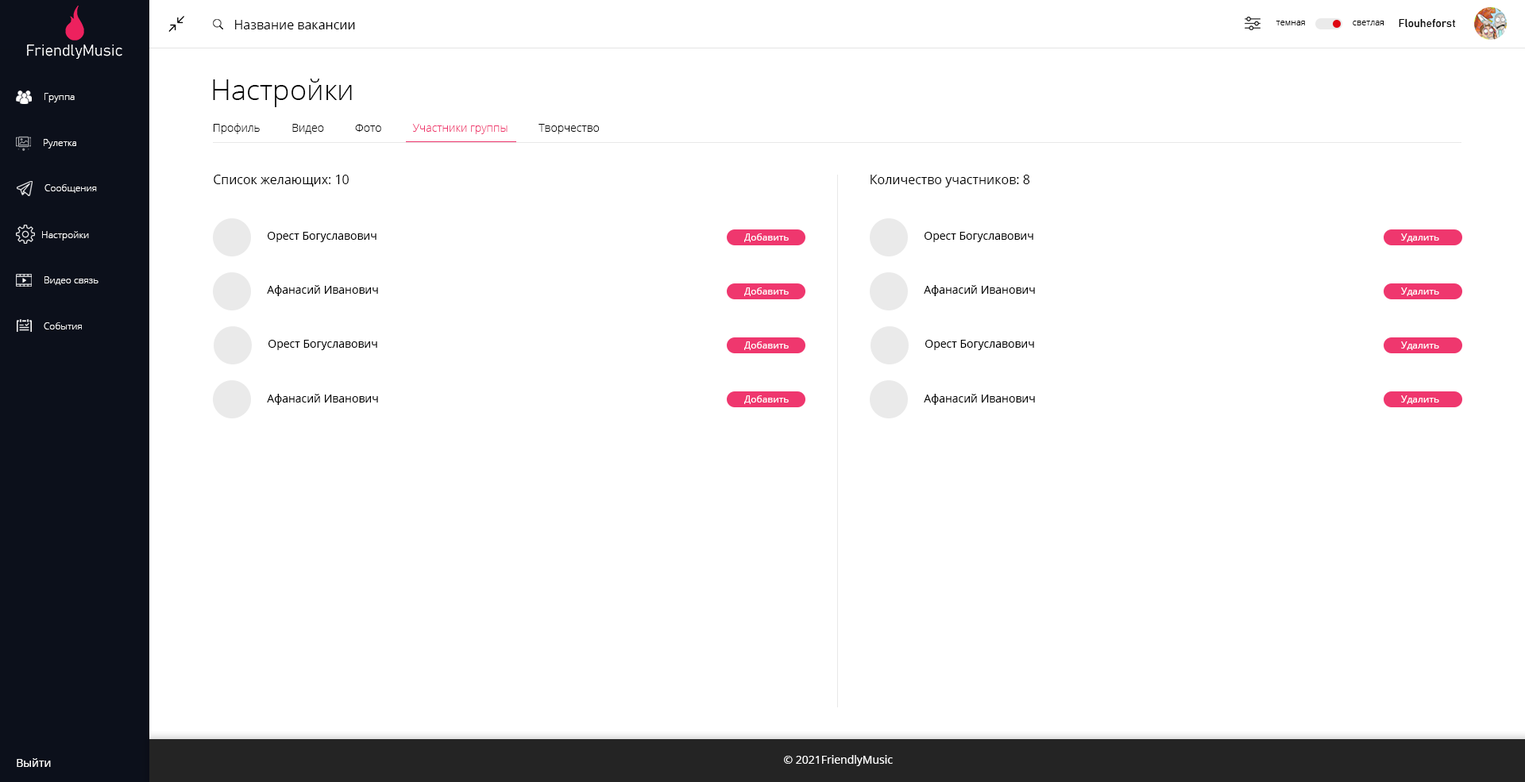
<style>
.page{position:relative;width:1525px;height:782px;background:#ffffff}
.page>*{position:absolute;margin:0}
.t1{font:12.7px "OpenSans";color:#000000}
.t2{font:8.7px "OpenSans-Light";color:#000000}
.t3{font:11.1px "Bahnschrift";color:#000000}
.t4{font:28.6px "OpenSans-Light";color:#000000}
.t5{font:9.5px "OpenSans-Light";color:#ffffff}
.t6{font:11.1px "OpenSans-Light";color:#000000}
.t7{font:11.1px "OpenSans-Light";color:#ef376e}
.t8{font:11.1px "OpenSans";color:#000000}
.t9{font:9.5px "OpenSans";color:#ffffff}
.t10{font:11.1px "OpenSans";color:#ffffff}
.t11{font:11.1px "aakar-medium";color:#ffffff}
</style>
<div class="page">
<p class="t1" style="left:235px;top:20px;width:120px;height:9px">Название вакансии</p>
<p class="t2" style="left:1275px;top:21px;width:30px;height:4px">темная</p>
<p class="t2" style="left:1352px;top:21px;width:31px;height:4px">светлая</p>
<p class="t3" style="left:1398px;top:18px;width:57px;height:10px">Flouheforst</p>
<p class="t4" style="left:213px;top:79px;width:139px;height:28px">Настройки</p>
<p class="t5" style="left:44px;top:93px;width:31px;height:9px">Группа</p>
<p class="t6" style="left:214px;top:123px;width:46px;height:11px">Профиль</p>
<p class="t6" style="left:292px;top:124px;width:32px;height:10px">Видео</p>
<p class="t6" style="left:355px;top:124px;width:26px;height:8px">Фото</p>
<p class="t7" style="left:412px;top:124px;width:95px;height:10px">Участники группы</p>
<p class="t6" style="left:538px;top:124px;width:61px;height:10px">Творчество</p>
<p class="t5" style="left:44px;top:139px;width:32px;height:9px">Рулетка</p>
<p class="t5" style="left:44px;top:184px;width:53px;height:9px">Сообщения</p>
<p class="t1" style="left:214px;top:175px;width:135px;height:12px">Список желающих: 10</p>
<p class="t1" style="left:870px;top:175px;width:160px;height:12px">Количество участников: 8</p>
<p class="t5" style="left:42px;top:231px;width:47px;height:10px">Настройки</p>
<p class="t8" style="left:268px;top:232px;width:108px;height:10px">Орест Богуславович</p>
<p class="t9" style="left:744px;top:233px;width:44px;height:9px">Добавить</p>
<p class="t8" style="left:924px;top:232px;width:109px;height:10px">Орест Богуславович</p>
<p class="t9" style="left:1401px;top:233px;width:38px;height:9px">Удалить</p>
<p class="t5" style="left:44px;top:276px;width:54px;height:9px">Видео связь</p>
<p class="t8" style="left:267px;top:285px;width:111px;height:11px">Афанасий Иванович</p>
<p class="t9" style="left:744px;top:287px;width:44px;height:9px">Добавить</p>
<p class="t8" style="left:923px;top:285px;width:112px;height:11px">Афанасий Иванович</p>
<p class="t9" style="left:1401px;top:287px;width:38px;height:9px">Удалить</p>
<p class="t5" style="left:44px;top:322px;width:38px;height:8px">События</p>
<p class="t8" style="left:268px;top:340px;width:109px;height:10px">Орест Богуславович</p>
<p class="t9" style="left:744px;top:341px;width:44px;height:9px">Добавить</p>
<p class="t8" style="left:925px;top:340px;width:109px;height:10px">Орест Богуславович</p>
<p class="t9" style="left:1401px;top:341px;width:38px;height:9px">Удалить</p>
<p class="t8" style="left:267px;top:394px;width:111px;height:11px">Афанасий Иванович</p>
<p class="t9" style="left:744px;top:395px;width:44px;height:9px">Добавить</p>
<p class="t8" style="left:923px;top:394px;width:112px;height:11px">Афанасий Иванович</p>
<p class="t9" style="left:1401px;top:395px;width:38px;height:9px">Удалить</p>
<p class="t10" style="left:17px;top:758px;width:34px;height:9px">Выйти</p>
<p class="t11" style="left:784px;top:755px;width:109px;height:11px">© 2021FriendlyMusic</p>
</div>
